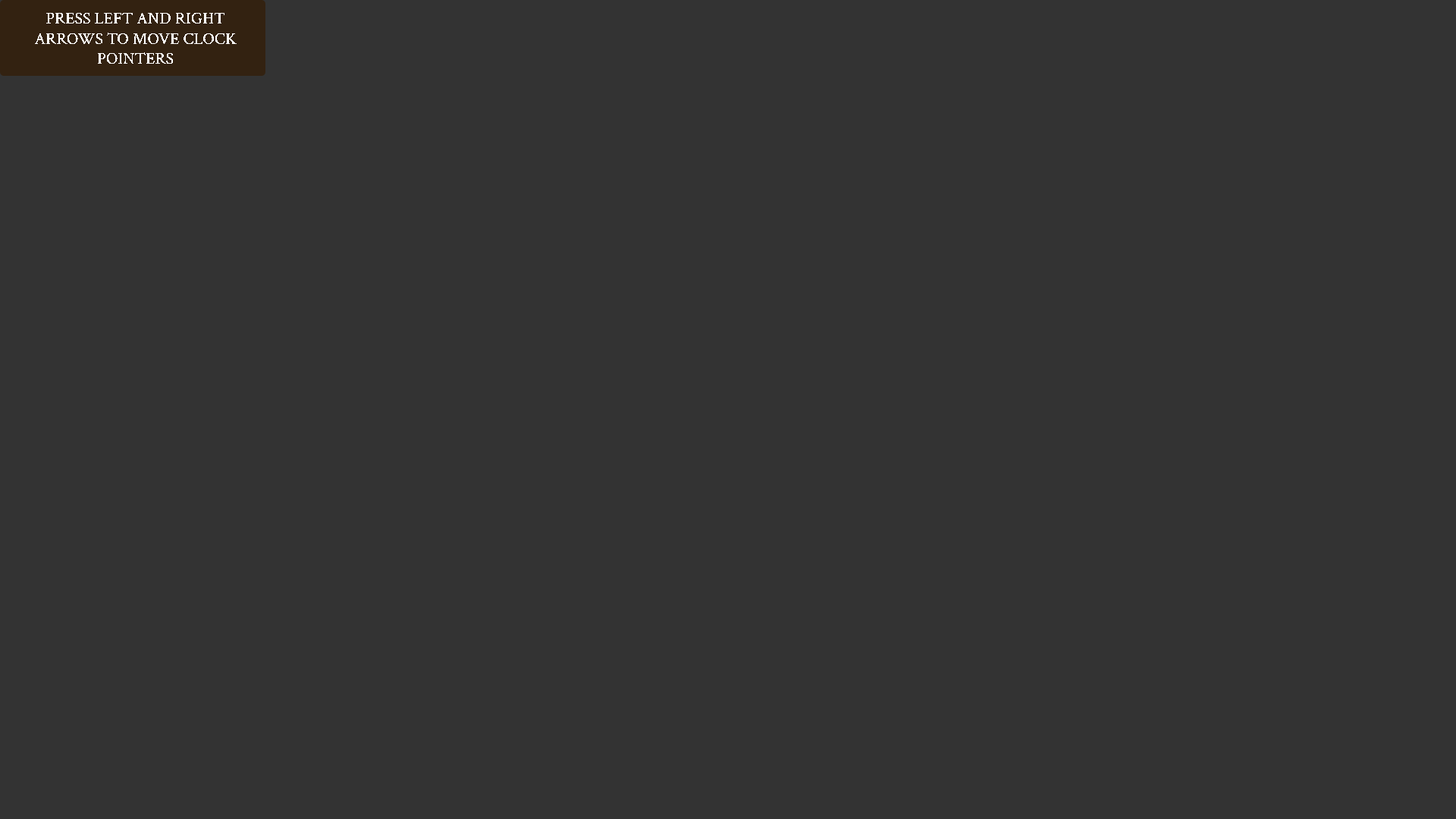
<style>
.page{position:relative;width:1456px;height:819px;background:#333333}
.page>*{position:absolute;margin:0}
.t1{font:16.7px "CrimsonText-Regular";color:#ffffff}
</style>
<div class="page">
<p class="t1" style="left:35px;top:13px;width:202px;height:51px;text-align:center">PRESS LEFT AND RIGHT ARROWS TO MOVE CLOCK POINTERS</p>
</div>
